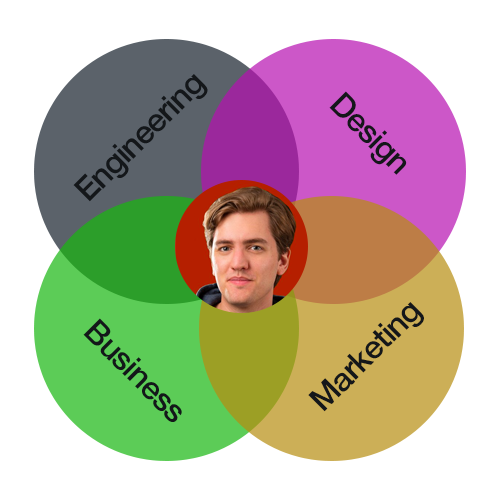
<style>
.page{position:relative;width:500px;height:500px;background:#ffffff}
.page>*{position:absolute;margin:0}
.t1{font:32px "HelveticaNeue-Medium";letter-spacing:-0.025em;color:#14171a}
.t2{font:32.1px "HelveticaNeue-Medium";letter-spacing:-0.025em;color:#14171a}
</style>
<div class="page">
<p class="t1" style="left:73px;top:74px;width:135px;height:128px;rotate:-45deg">Engineering</p>
<p class="t1" style="left:329px;top:91px;width:78px;height:84px;rotate:45deg">Design</p>
<p class="t2" style="left:308px;top:302px;width:116px;height:110px;rotate:-45deg">Marketing</p>
<p class="t2" style="left:83px;top:318px;width:99px;height:104px;rotate:45deg">Business</p>
</div>
